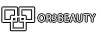
<style>
.page{position:relative;width:100px;height:37px;background:#ffffff}
.page>*{position:absolute;margin:0}
.t1{font:11px "MyriadPro-Regular";letter-spacing:0.02em;color:#ffffff}
</style>
<div class="page">
<p class="t1" style="left:38px;top:14px;width:58px;height:8px">OR3BEAUTY</p>
</div>
